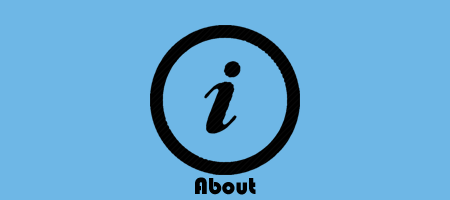
<style>
.page{position:relative;width:450px;height:200px;background:#6eb7e6}
.page>*{position:absolute;margin:0}
.t1{font:24px "Bauhaus93";color:#000000}
</style>
<div class="page">
<p class="t1" style="left:195px;top:177px;width:61px;height:18px">About</p>
</div>
